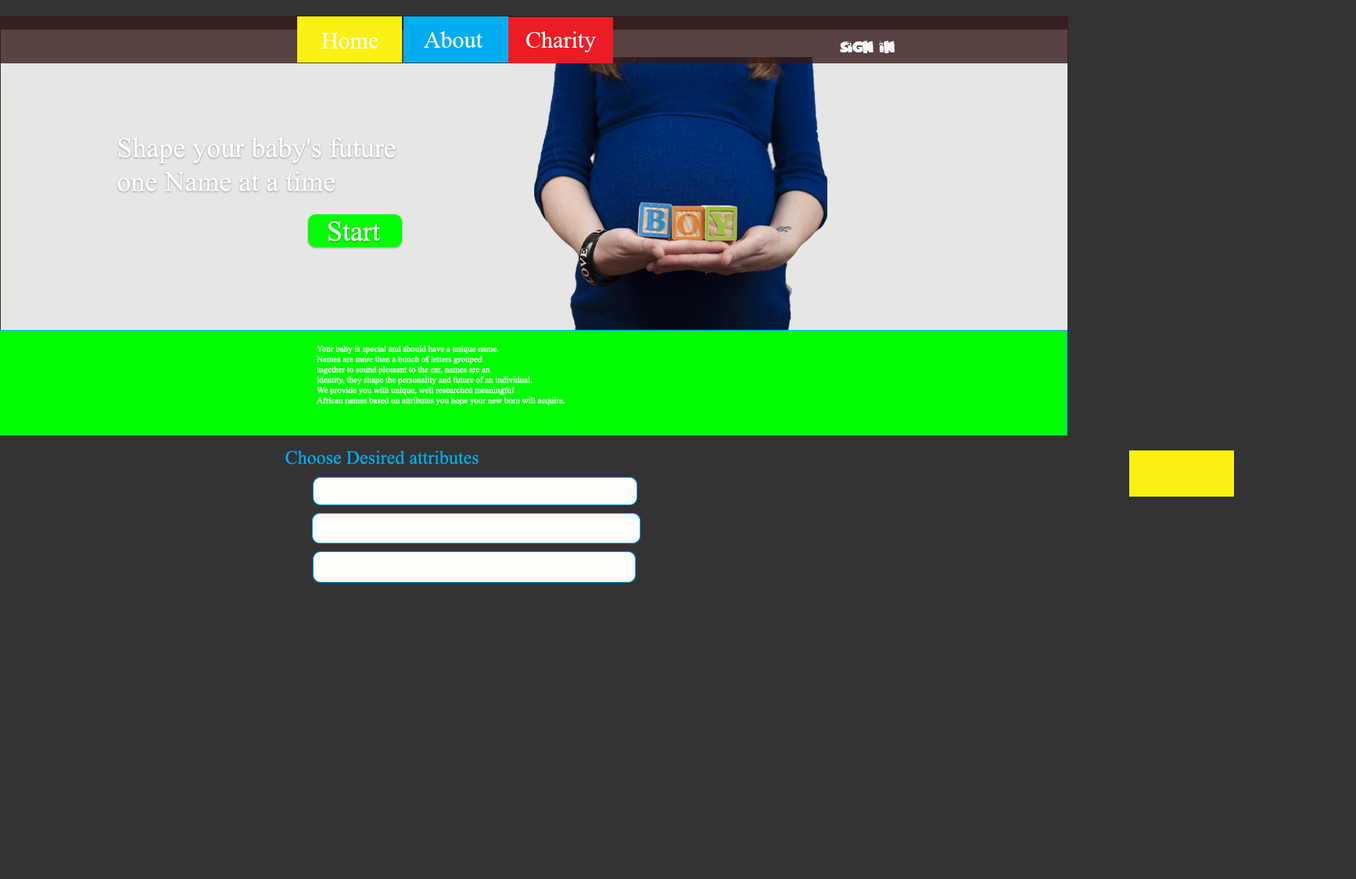
<style>
.page{position:relative;width:1356px;height:879px;background:#333333}
.page>*{position:absolute;margin:0}
.t1{font:23.5px "TimesNewRomanPSMT";color:#fcfcfa}
.t2{font:12.5px "FamilyGuy";color:#fcf9f9}
.t3{font:28.2px "TimesNewRomanPSMT";color:#fefefd}
.t4{font:8.6px "TimesNewRomanPSMT";color:#fbfbfa}
.t5{font:18.8px "TimesNewRomanPSMT";color:#00aeef}
</style>
<div class="page">
<p class="t1" style="left:321px;top:33px;width:58px;height:15px">Home</p>
<p class="t1" style="left:424px;top:31px;width:59px;height:17px">About</p>
<p class="t1" style="left:526px;top:31px;width:70px;height:21px">Charity</p>
<p class="t2" style="left:840px;top:41px;width:55px;height:12px">Sign in</p>
<p class="t3" style="left:117px;top:137px;width:279px;height:55px">Shape your baby's future <br>one Name at a time</p>
<p class="t3" style="left:329px;top:221px;width:51px;height:21px">Start</p>
<p class="t4" style="left:316px;top:346px;width:249px;height:60px">Your baby is special and should have a unique name. <br>Names are more than a bunch of letters grouped <br>together to sound pleasant to the ear, names are an <br>identity, they shape the personality and future of an individual.  <br>We provide you with unique, well researched meaningful <br>African names based on attributes you hope your new born will acquire.</p>
<p class="t5" style="left:285px;top:451px;width:194px;height:14px">Choose Desired attributes</p>
</div>
